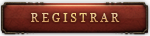
<style>
.page{position:relative;width:150px;height:36px}
.page>*{position:absolute;margin:0}
.t1{font:11.5px "Georgia";letter-spacing:0.25em;text-transform:uppercase}
</style>
<div class="page">
<p class="t1" style="left:31px;top:14px;width:89px;height:9px">REGISTRAR</p>
<p class="t1" style="left:31px;top:13px;width:89px;height:9px">REGISTRAR</p>
<p class="t1" style="left:31px;top:13px;width:89px;height:9px">REGISTRAR</p>
<p class="t1" style="left:31px;top:13px;width:89px;height:9px">REGISTRAR</p>
</div>
